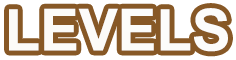
<style>
.page{position:relative;width:236px;height:60px;background:#875826}
.page>*{position:absolute;margin:0}
.t1{font:58px "Arial-BoldMT";color:#ffffff}
</style>
<div class="page">
<p class="t1" style="left:9px;top:8px;width:219px;height:44px">LEVELS</p>
</div>
